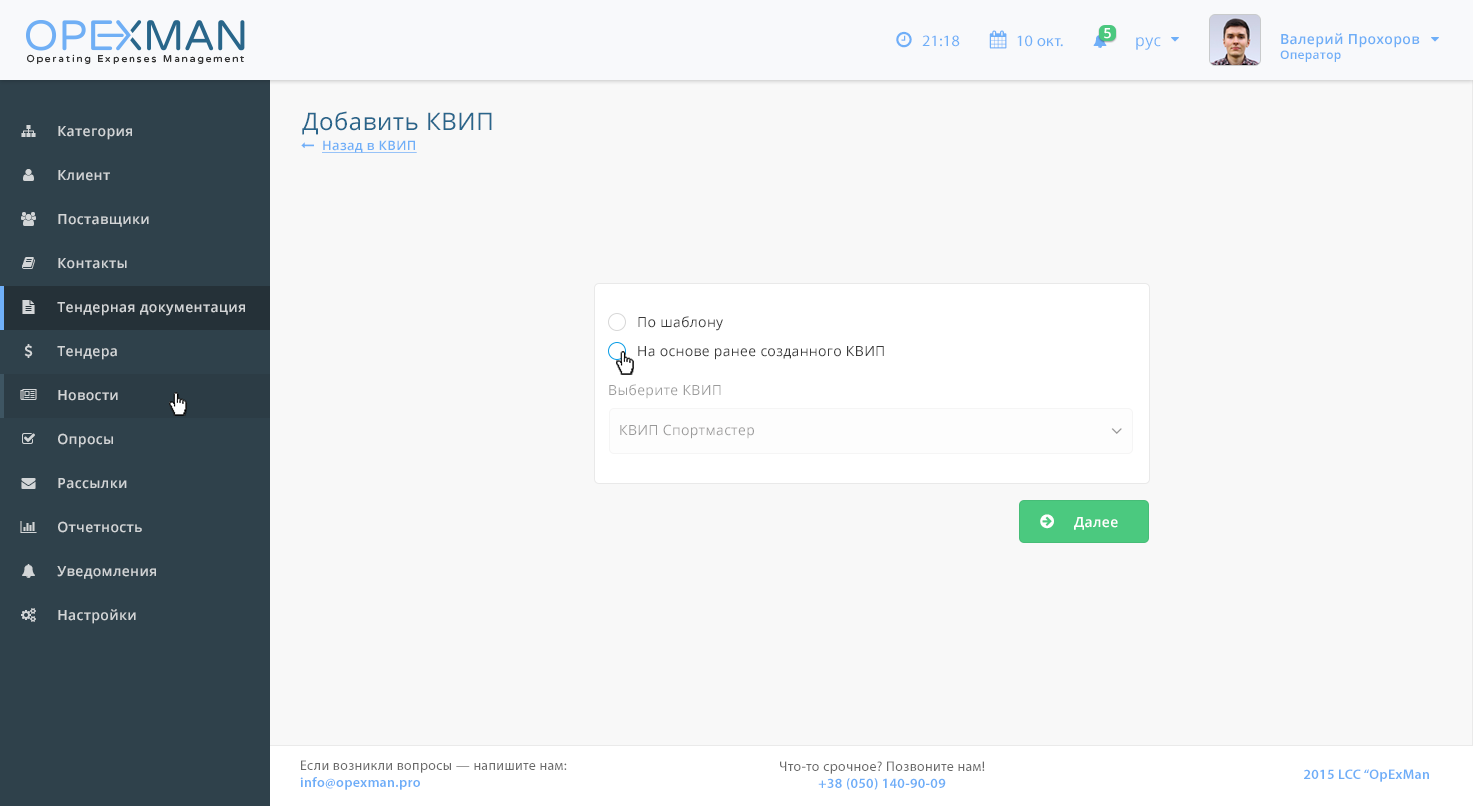
<style>
.page{position:relative;width:1473px;height:806px;background:#f8f8f8}
.page>*{position:absolute;margin:0}
.t1{font:13.9px "OpenSans-Semibold";letter-spacing:0.025em;color:#ffffff}
.t2{font:15.9px "MyriadPro-Regular";letter-spacing:0.025em;color:#6faff8}
.t3{font:15.9px "OpenSans";letter-spacing:0.025em;color:#6eaff8}
.t4{font:13.9px "OpenSans-Semibold";letter-spacing:0.025em;color:#6eaef7}
.t5{font:12px "OpenSans-Semibold";letter-spacing:0.025em;color:#6eaef7}
.t6{font:23.9px "OpenSans";letter-spacing:0.025em;color:#29658b}
.t7{font:13.9px "OpenSans-Semibold";letter-spacing:0.025em;color:#d2d5d7}
.t8{font:13px "OpenSans-Semibold";letter-spacing:0.025em;color:#6faff8;text-decoration:underline}
.t9{font:13.9px "OpenSans";letter-spacing:0.025em;color:#3a3a3a}
.t10{font:13.9px "OpenSans";letter-spacing:0.025em;color:#9b9b9b}
.t11{font:13.9px "OpenSans";letter-spacing:0.025em;color:#999999}
.t12{font:13.9px "MyriadPro-Regular";letter-spacing:0.025em;color:#696969}
.t13{font:13.9px "MyriadPro-Semibold";letter-spacing:0.025em;color:#6eaef8}
</style>
<div class="page">
<p class="t1" style="left:1104px;top:28px;width:7px;height:11px">5</p>
<p class="t2" style="left:922px;top:35px;width:38px;height:12px">21:18</p>
<p class="t2" style="left:1017px;top:35px;width:46px;height:12px">10 окт.</p>
<p class="t3" style="left:1136px;top:37px;width:25px;height:13px">рус</p>
<p class="t4" style="left:1280px;top:33px;width:140px;height:29px">Валерий Прохоров<br><span class="t5">Оператор</span></p>
<p class="t6" style="left:302px;top:111px;width:190px;height:24px">Добавить КВИП</p>
<p class="t7" style="left:58px;top:126px;width:74px;height:14px">Категория</p>
<p class="t8" style="left:322px;top:140px;width:95px;height:13px">Назад в КВИП</p>
<p class="t7" style="left:58px;top:170px;width:52px;height:11px">Клиент</p>
<p class="t7" style="left:58px;top:214px;width:91px;height:13px">Поставщики</p>
<p class="t7" style="left:58px;top:258px;width:69px;height:11px">Контакты</p>
<p class="t7" style="left:57px;top:302px;width:188px;height:14px">Тендерная документация</p>
<p class="t9" style="left:638px;top:316px;width:85px;height:15px">По шаблону</p>
<p class="t7" style="left:57px;top:346px;width:60px;height:14px">Тендера</p>
<p class="t9" style="left:638px;top:346px;width:246px;height:14px">На основе ранее созданного КВИП</p>
<p class="t7" style="left:58px;top:390px;width:60px;height:11px">Новости</p>
<p class="t10" style="left:609px;top:384px;width:112px;height:15px">Выберите КВИП</p>
<p class="t11" style="left:620px;top:424px;width:134px;height:15px">КВИП Спортмастер</p>
<p class="t7" style="left:58px;top:433px;width:55px;height:15px">Опросы</p>
<p class="t7" style="left:58px;top:478px;width:69px;height:11px">Рассылки</p>
<p class="t7" style="left:58px;top:521px;width:84px;height:12px">Отчетность</p>
<p class="t1" style="left:1074px;top:517px;width:44px;height:13px">Далее</p>
<p class="t7" style="left:57px;top:566px;width:99px;height:13px">Уведомления</p>
<p class="t7" style="left:58px;top:609px;width:78px;height:15px">Настройки</p>
<p class="t12" style="left:300px;top:760px;width:267px;height:30px">Если возникли вопросы — напишите нам:<br><span class="t13">info@opexman.pro</span></p>
<p class="t12" style="left:780px;top:761px;width:205px;height:29px;text-align:center">Что-то срочное? Позвоните нам!<br><span class="t13">+38 (050) 140-90-09</span></p>
<p class="t13" style="left:1304px;top:769px;width:125px;height:13px">2015 LCC “OpExMan</p>
</div>
